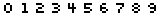
<style>
.page{position:relative;width:160px;height:16px;background:#ffffff}
.page>*{position:absolute;margin:0}
.t1{font:16px "Silkscreen-Regular";color:#000000}
</style>
<div class="page">
<p class="t1" style="left:4px;top:3px;width:8px;height:10px">0</p>
<p class="t1" style="left:22px;top:3px;width:6px;height:10px">1</p>
<p class="t1" style="left:36px;top:3px;width:8px;height:10px">2</p>
<p class="t1" style="left:52px;top:3px;width:8px;height:10px">3</p>
<p class="t1" style="left:68px;top:3px;width:8px;height:10px">4</p>
<p class="t1" style="left:84px;top:3px;width:8px;height:10px">5</p>
<p class="t1" style="left:100px;top:3px;width:8px;height:10px">6</p>
<p class="t1" style="left:116px;top:3px;width:8px;height:10px">7</p>
<p class="t1" style="left:132px;top:3px;width:8px;height:10px">8</p>
<p class="t1" style="left:148px;top:3px;width:8px;height:10px">9</p>
</div>
